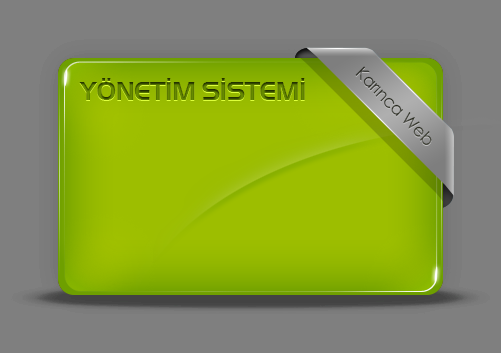
<style>
.page{position:relative;width:501px;height:353px;background:#7f7f7f}
.page>*{position:absolute;margin:0}
.t1{font:27px "HandelGotD-Bold";letter-spacing:-0.025em;text-transform:uppercase}
.t2{font:17px "CenturyGothic";letter-spacing:-0.025em;color:#3c3d33}
</style>
<div class="page">
<p class="t1" style="left:79px;top:78px;width:226px;height:22px">Yönetim Sistemi</p>
<p class="t2" style="left:355px;top:66px;width:77px;height:79px;rotate:45deg">Karınca Web</p>
</div>
